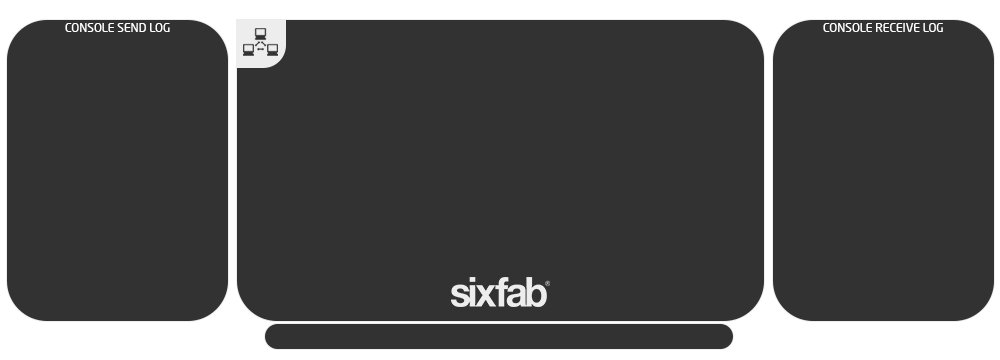
<style>
.page{position:relative;width:1000px;height:360px;background:#323232}
.page>*{position:absolute;margin:0}
.t1{font:12px "NeoSansPro-Regular";color:#ffffff}
</style>
<div class="page">
<p class="t1" style="left:65px;top:23px;width:105px;height:9px">CONSOLE SEND LOG</p>
<p class="t1" style="left:823px;top:23px;width:120px;height:9px">CONSOLE RECEIVE LOG</p>
</div>
